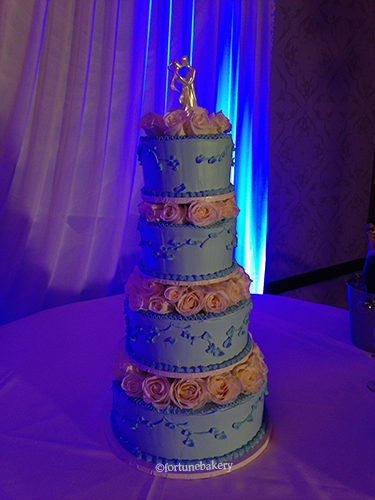
<style>
.page{position:relative;width:375px;height:500px}
.page>*{position:absolute;margin:0}
.t1{font:11.7px "Palatino-Roman";color:#c1bfcd;scale:0.94 1}
</style>
<div class="page">
<p class="t1" style="left:155px;top:460px;width:78px;height:13px;rotate:-3deg">©fortunebakery</p>
</div>
